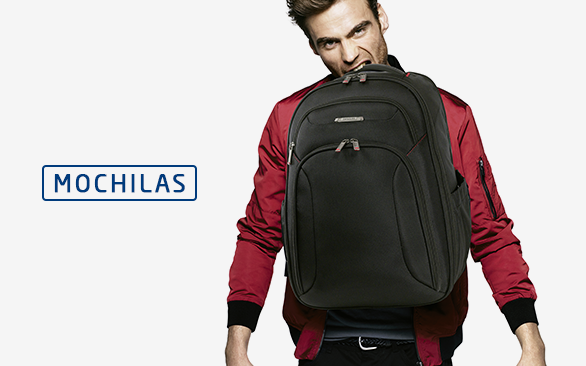
<style>
.page{position:relative;width:586px;height:366px;background:#f5f5f5}
.page>*{position:absolute;margin:0}
.t1{font:24px "NeoSansPro-Regular";letter-spacing:0.1em;color:#003b7c;font-weight:bold}
</style>
<div class="page">
<p class="t1" style="left:54px;top:174px;width:131px;height:19px">MOCHILAS</p>
</div>
